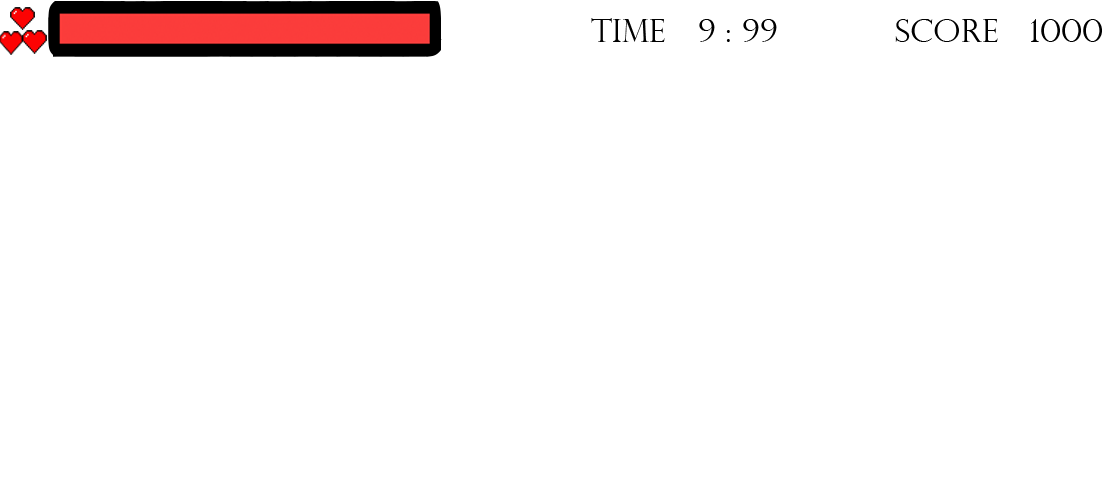
<style>
.page{position:relative;width:1112px;height:491px;background:#ffffff}
.page>*{position:absolute;margin:0}
.t1{font:32px "PerpetuaTitlingMT-Light";color:#000000}
</style>
<div class="page">
<p class="t1" style="left:591px;top:18px;width:511px;height:24px">TIME   9 : 99           Score   1000</p>
</div>
